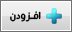
<style>
.page{position:relative;width:72px;height:32px}
.page>*{position:absolute;margin:0}
.t1{font:12px "Mj_CasablancaLight";color:#030000}
</style>
<div class="page">
<p class="t1" style="left:10px;top:11px;width:31px;height:11px">افـزودن</p>
</div>
